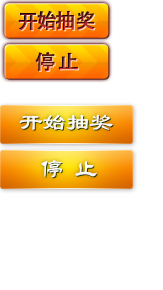
<style>
.page{position:relative;width:163px;height:290px;background:#ffffff}
.page>*{position:absolute;margin:0}
.t1{font:20px "AdobeHeitiStd-Regular";letter-spacing:-0.06em;font-weight:bold}
.t2{font:24px "LiSu";letter-spacing:-0.025em;color:#fafafa}
.t3{font:15px "AdobeHeitiStd-Regular";letter-spacing:-0.025em;color:#fafafa}
.t4{font:24px "STLiti";letter-spacing:-0.025em;color:#fbfbfb}
.t5{font:15px "AdobeHeitiStd-Regular";letter-spacing:-0.025em;color:#fbfbfb}
</style>
<div class="page">
<p class="t1" style="left:18px;top:10px;width:77px;height:21px">开始抽奖</p>
<p class="t1" style="left:35px;top:52px;width:43px;height:20px">停 止</p>
<p class="t2" style="left:19px;top:114px;width:94px;height:16px"><span class="t3">      </span>开始抽奖</p>
<p class="t4" style="left:41px;top:160px;width:56px;height:18px"><span class="t5">           </span>停  止</p>
</div>
